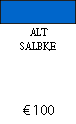
<style>
.page{position:relative;width:76px;height:124px;background:#ffffff}
.page>*{position:absolute;margin:0}
.t1{font:12px "AdobeDevanagari-Regular";color:#000000;scale:0.9 1}
.t2{font:14px "MyriadPro-Regular";color:#000000}
</style>
<div class="page">
<p class="t1" style="left:20px;top:28px;width:36px;height:23px;text-align:center">ALT<br>SALBKE</p>
<p class="t2" style="left:23px;top:105px;width:31px;height:10px">€ 100</p>
</div>
